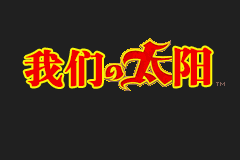
<style>
.page{position:relative;width:240px;height:160px;background:#202020}
.page>*{position:absolute;margin:0}
.t1{font:39.9px "STSongti-SC-Black";color:#f00000;font-weight:bold}
.t2{font:44px "STSongti-SC-Black";color:#f00000;font-weight:bold}
</style>
<div class="page">
<p class="t1" style="left:24px;top:49px;width:80px;height:38px">我们</p>
<p class="t2" style="left:174px;top:47px;width:38px;height:40px">阳</p>
</div>
